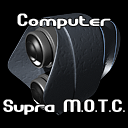
<style>
.page{position:relative;width:128px;height:128px;background:#000000}
.page>*{position:absolute;margin:0}
.t1{font:18px "GravitateBRK";color:#ffffff}
.t2{font:18px "GravitateBRK";letter-spacing:-0.025em;color:#ffffff}
</style>
<div class="page">
<p class="t1" style="left:17px;top:13px;width:94px;height:16px">Computer</p>
<p class="t1" style="left:3px;top:99px;width:122px;height:16px"><span class="t2">Supra </span>M.O.T.C.</p>
</div>
